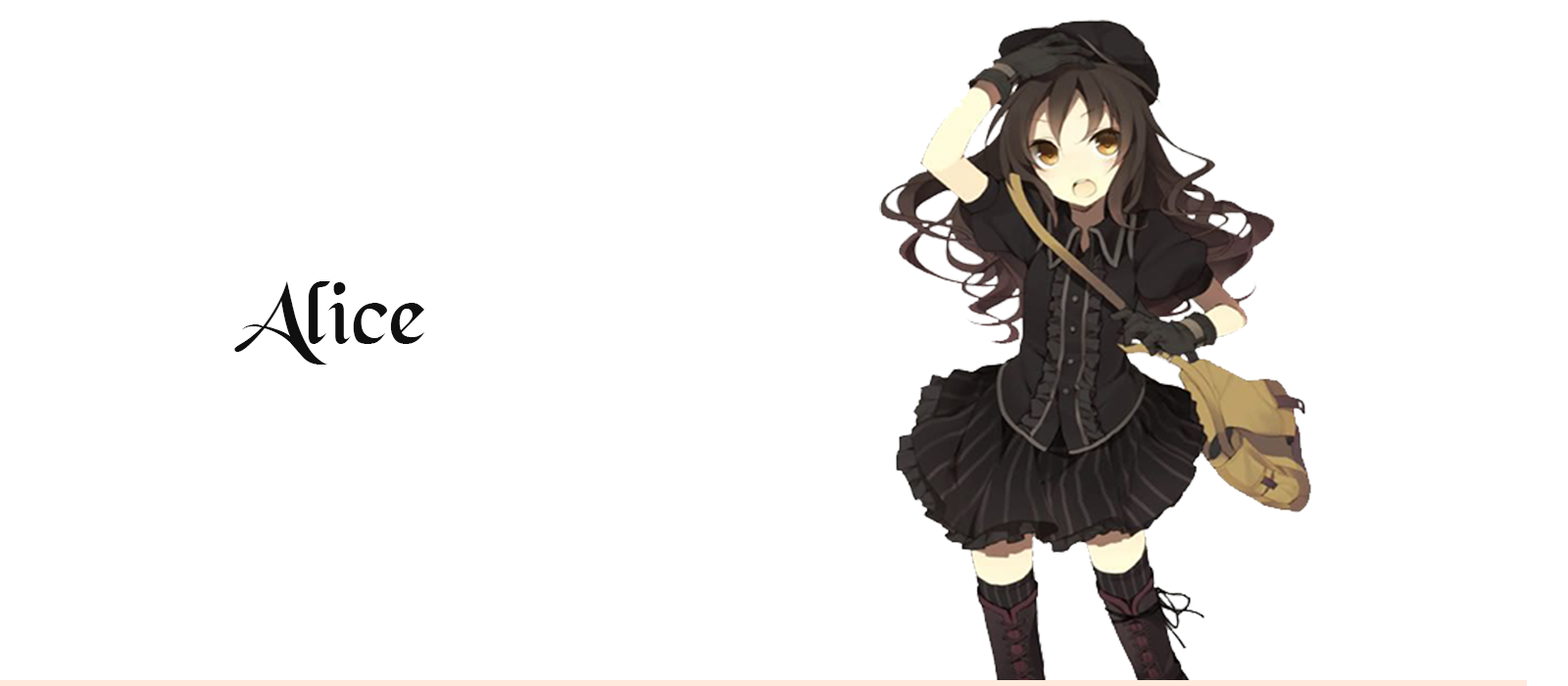
<style>
.page{position:relative;width:1568px;height:686px;background:#ffffff}
.page>*{position:absolute;margin:0}
.t1{font:93.1px "BlackChancery";color:#101010}
</style>
<div class="page">
<p class="t1" style="left:234px;top:281px;width:190px;height:84px">Alice</p>
</div>
